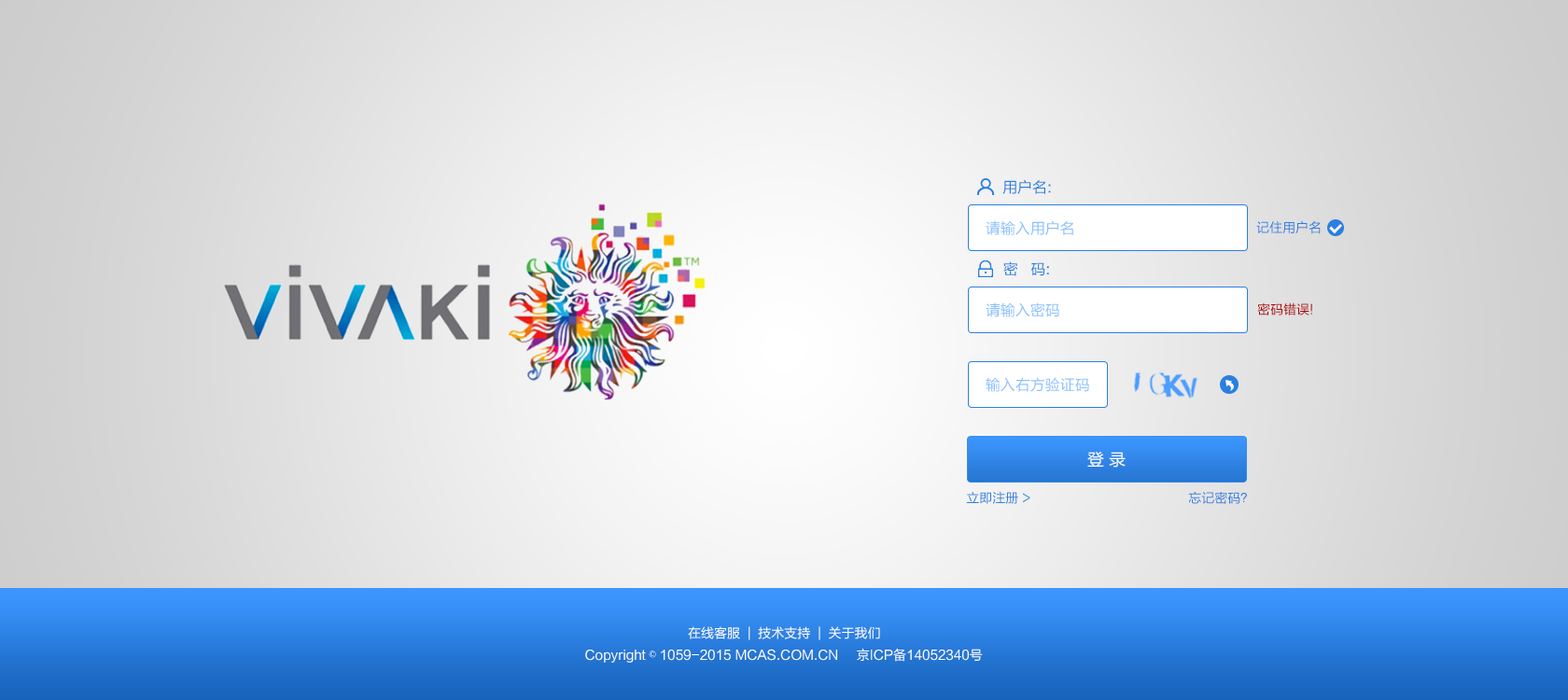
<style>
.page{position:relative;width:1568px;height:700px}
.page>*{position:absolute;margin:0}
.t1{font:14.9px "FZLTHJW--GB1-0";color:#2b7fe0}
.t2{font:14.9px "FZLTHJW--GB1-0";color:#8ac0ff}
.t3{font:13.1px "FZLTHJW--GB1-0";color:#2b7fe0}
.t4{font:13.1px "FZLTHJW--GB1-0";color:#ad0000}
.t5{font:16.8px "FZLTHJW--GB1-0";color:#ffffff}
.t6{font:13.1px "FZLTHJW--GB1-0";color:#ffffff}
.t7{font:13.1px "SimSun";color:#ffffff}
</style>
<div class="page">
<p class="t1" style="left:1002px;top:179px;width:49px;height:15px">用户名:</p>
<p class="t2" style="left:986px;top:220px;width:87px;height:15px">请输入用户名</p>
<p class="t3" style="left:1256px;top:221px;width:65px;height:13px">记住用户名</p>
<p class="t1" style="left:1003px;top:261px;width:46px;height:15px">密   码:</p>
<p class="t2" style="left:986px;top:302px;width:73px;height:15px">请输入密码</p>
<p class="t4" style="left:1257px;top:302px;width:55px;height:13px">密码错误!</p>
<p class="t2" style="left:986px;top:377px;width:103px;height:15px">输入右方验证码</p>
<p class="t5" style="left:1087px;top:452px;width:39px;height:16px">登 录</p>
<p class="t3" style="left:966px;top:491px;width:64px;height:13px">立即注册 &gt;</p>
<p class="t3" style="left:1188px;top:491px;width:59px;height:13px">忘记密码？</p>
<p class="t6" style="left:688px;top:626px;width:192px;height:14px">在线客服  |  技术支持  |  关于我们</p>
<p class="t6" style="left:585px;top:649px;width:398px;height:14px">Copyright <span class="t7">©</span> 1059-2015 MCAS.COM.CN     京ICP备14052340号</p>
</div>
